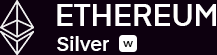
<style>
.page{position:relative;width:217px;height:55px;background:#0d000f}
.page>*{position:absolute;margin:0}
.t1{font:30px "Eina03-SemiBold";color:#ffffff}
.t2{font:20px "Eina03-SemiBold";color:#ffffff}
.t3{font:12px "Eina03-SemiBold";color:#111111}
</style>
<div class="page">
<p class="t1" style="left:57px;top:4px;width:159px;height:22px">ETHEREUM</p>
<p class="t2" style="left:57px;top:36px;width:52px;height:15px">Silver</p>
<p class="t3" style="left:123px;top:41px;width:10px;height:6px">w</p>
</div>
